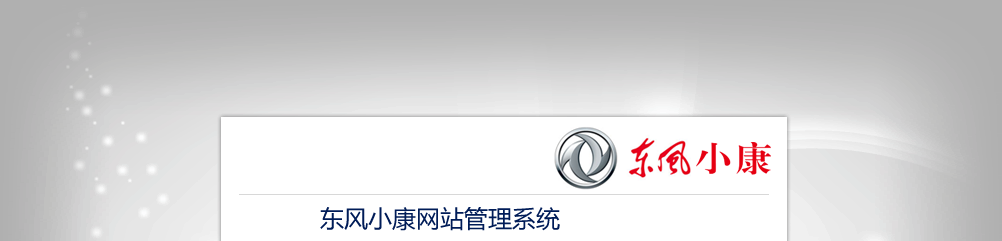
<style>
.page{position:relative;width:1002px;height:241px;background:#ffffff}
.page>*{position:absolute;margin:0}
.t1{font:24px "MicrosoftYaHei";color:#001c58}
</style>
<div class="page">
<p class="t1" style="left:320px;top:207px;width:240px;height:24px">东风小康网站管理系统</p>
</div>
